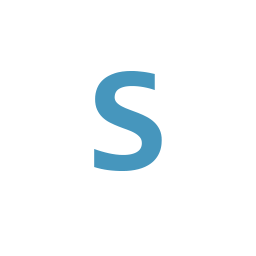
<style>
.page{position:relative;width:256px;height:256px;background:#ffffff}
.page>*{position:absolute;margin:0}
.t1{font:150px "Consolas-Bold";color:#4696bd}
</style>
<div class="page">
<p class="t1" style="left:94px;top:71px;width:68px;height:100px">S</p>
</div>
